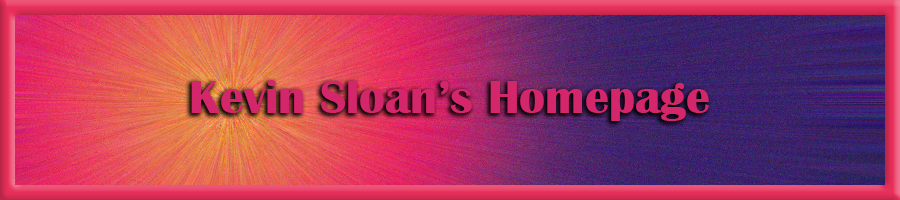
<style>
.page{position:relative;width:900px;height:200px}
.page>*{position:absolute;margin:0}
.t1{font:48px "BritannicBold";color:#d4266b}
</style>
<div class="page">
<p class="t1" style="left:191px;top:80px;width:518px;height:41px">Kevin Sloan’s Homepage</p>
</div>
